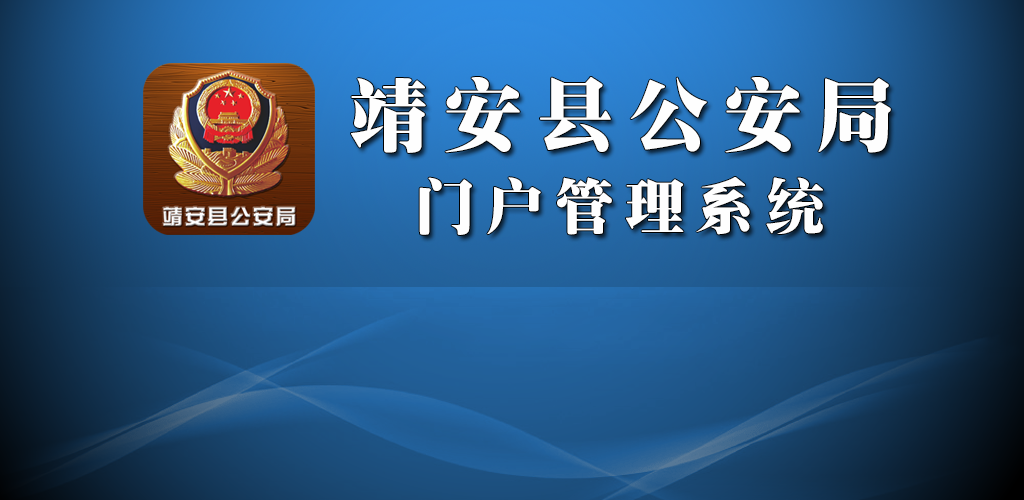
<style>
.page{position:relative;width:1024px;height:500px}
.page>*{position:absolute;margin:0}
.t1{font:79px "¾­µäÌØËÎ¼ò Regular";letter-spacing:0.18em;color:#fefefe}
.t2{font:59.3px "¾­µäÌØËÎ¼ò Regular";letter-spacing:0.18em;color:#fefefe}
</style>
<div class="page">
<p class="t1" style="left:351px;top:77px;width:540px;height:76px">靖安县公安局</p>
<p class="t2" style="left:419px;top:177px;width:404px;height:58px">门户管理系统</p>
</div>
